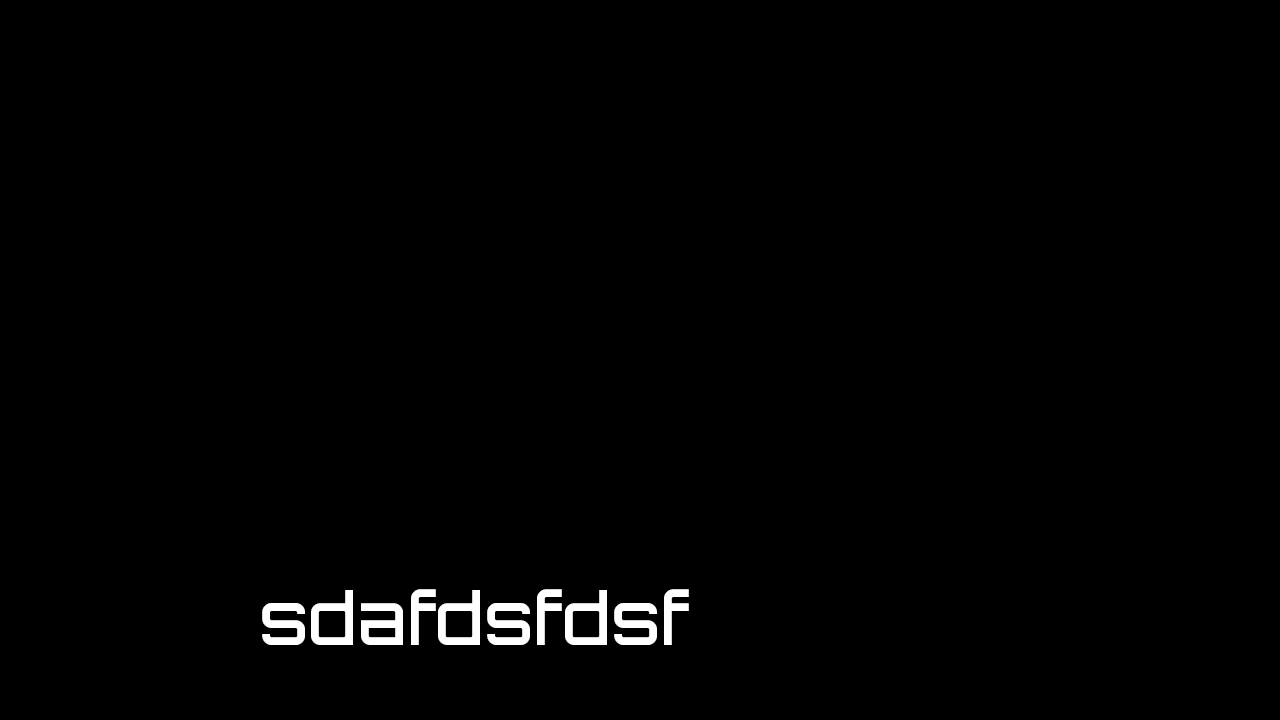
<style>
.page{position:relative;width:1280px;height:720px;background:#000000}
.page>*{position:absolute;margin:0}
.t1{font:72px "Orbitron-Medium";color:#ffffff}
</style>
<div class="page">
<p class="t1" style="left:262px;top:589px;width:427px;height:56px">ыфыфвыфыфвыфвsdafdsfdsf</p>
</div>
